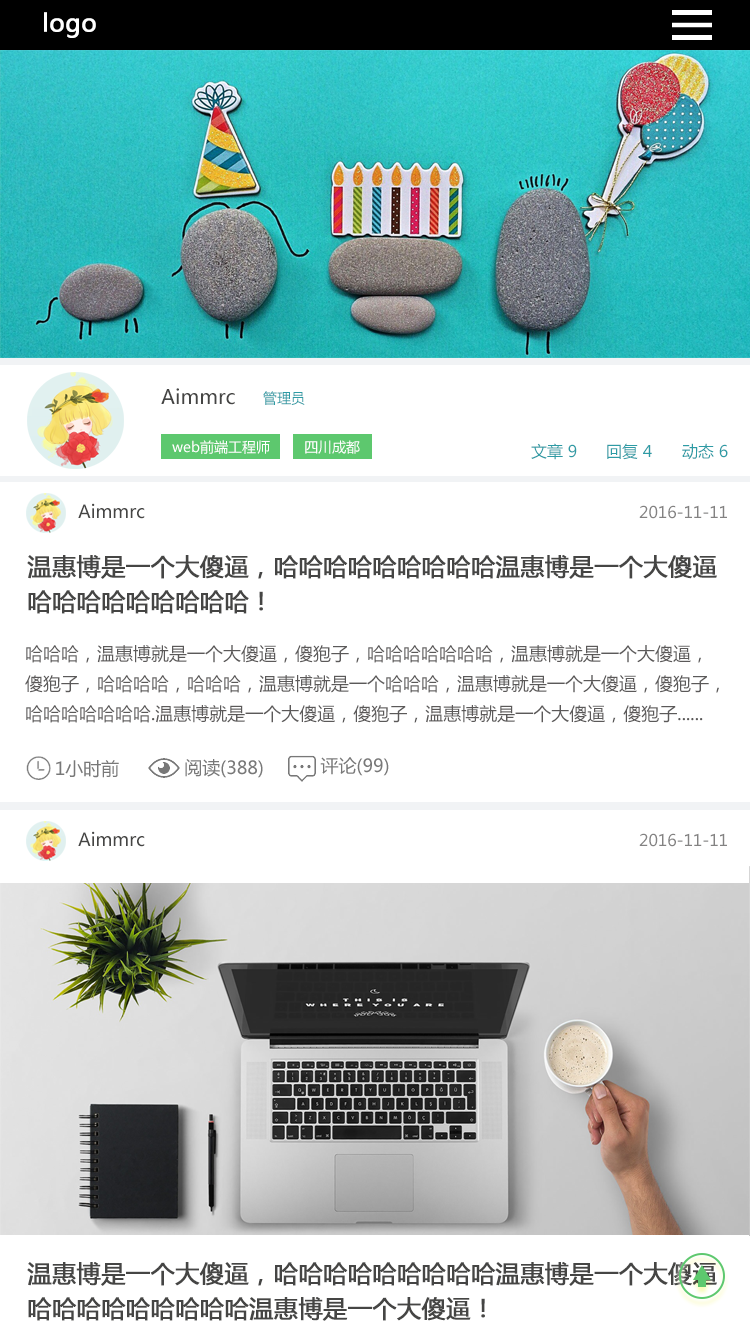
<style>
.page{position:relative;width:750px;height:1334px;background:#ffffff}
.page>*{position:absolute;margin:0}
.t1{font:24px "MicrosoftYaHei";color:#ffffff;font-weight:bold}
.t2{font:20px "MicrosoftYaHei";color:#454544}
.t3{font:14px "MicrosoftYaHei";color:#2d9ba5}
.t4{font:14px "MicrosoftYaHei";color:#ffffff}
.t5{font:16px "MicrosoftYaHei";color:#2d9ba5}
.t6{font:18px "MicrosoftYaHei";color:#454544}
.t7{font:16px "MicrosoftYaHei";color:#838282}
.t8{font:24px/35px "MicrosoftYaHei";color:#454544;font-weight:bold}
.t9{font:18px/30px "MicrosoftYaHei";color:#5b5959}
.t10{font:18px "MicrosoftYaHei";color:#787878}
</style>
<div class="page">
<p class="t1" style="left:44px;top:12px;width:52px;height:26px">logo</p>
<p class="t2" style="left:161px;top:388px;width:74px;height:17px">Aimmrc</p>
<p class="t3" style="left:263px;top:391px;width:42px;height:14px">管理员</p>
<p class="t4" style="left:172px;top:440px;width:98px;height:14px">web前端工程师</p>
<p class="t4" style="left:305px;top:440px;width:55px;height:14px">四川成都</p>
<p class="t5" style="left:531px;top:443px;width:46px;height:17px">文章 9</p>
<p class="t5" style="left:607px;top:443px;width:45px;height:17px">回复 4</p>
<p class="t5" style="left:682px;top:443px;width:46px;height:17px">动态 6</p>
<p class="t6" style="left:78px;top:503px;width:67px;height:16px">Aimmrc</p>
<p class="t7" style="left:639px;top:505px;width:88px;height:14px">2016-11-11</p>
<p class="t8" style="left:27px;top:555px;width:690px;height:59px">温惠博是一个大傻逼，哈哈哈哈哈哈哈哈哈温惠博是一个大傻逼<br>哈哈哈哈哈哈哈哈哈！</p>
<p class="t9" style="left:25px;top:645px;width:694px;height:78px">哈哈哈，温惠博就是一个大傻逼，傻狍子，哈哈哈哈哈哈哈，温惠博就是一个大傻逼，<br>傻狍子，哈哈哈哈，哈哈哈，温惠博就是一个哈哈哈，温惠博就是一个大傻逼，傻狍子，<br>哈哈哈哈哈哈哈.温惠博就是一个大傻逼，傻狍子，温惠博就是一个大傻逼，傻狍子......</p>
<p class="t10" style="left:56px;top:760px;width:63px;height:18px">1小时前</p>
<p class="t10" style="left:185px;top:759px;width:78px;height:19px">阅读(388)</p>
<p class="t10" style="left:320px;top:757px;width:69px;height:19px">评论(99)</p>
<p class="t6" style="left:78px;top:831px;width:67px;height:16px">Aimmrc</p>
<p class="t7" style="left:639px;top:833px;width:88px;height:14px">2016-11-11</p>
<p class="t8" style="left:27px;top:1262px;width:690px;height:59px">温惠博是一个大傻逼，哈哈哈哈哈哈哈哈哈温惠博是一个大傻逼<br>哈哈哈哈哈哈哈哈哈温惠博是一个大傻逼！</p>
</div>
